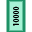
<style>
.page{position:relative;width:32px;height:32px;background:#ffffff}
.page>*{position:absolute;margin:0}
.t1{font:8px "MyriadPro-Regular";color:#000000}
</style>
<div class="page">
<p class="t1" style="left:13px;top:6px;width:6px;height:20px;rotate:-90deg">10000</p>
</div>
